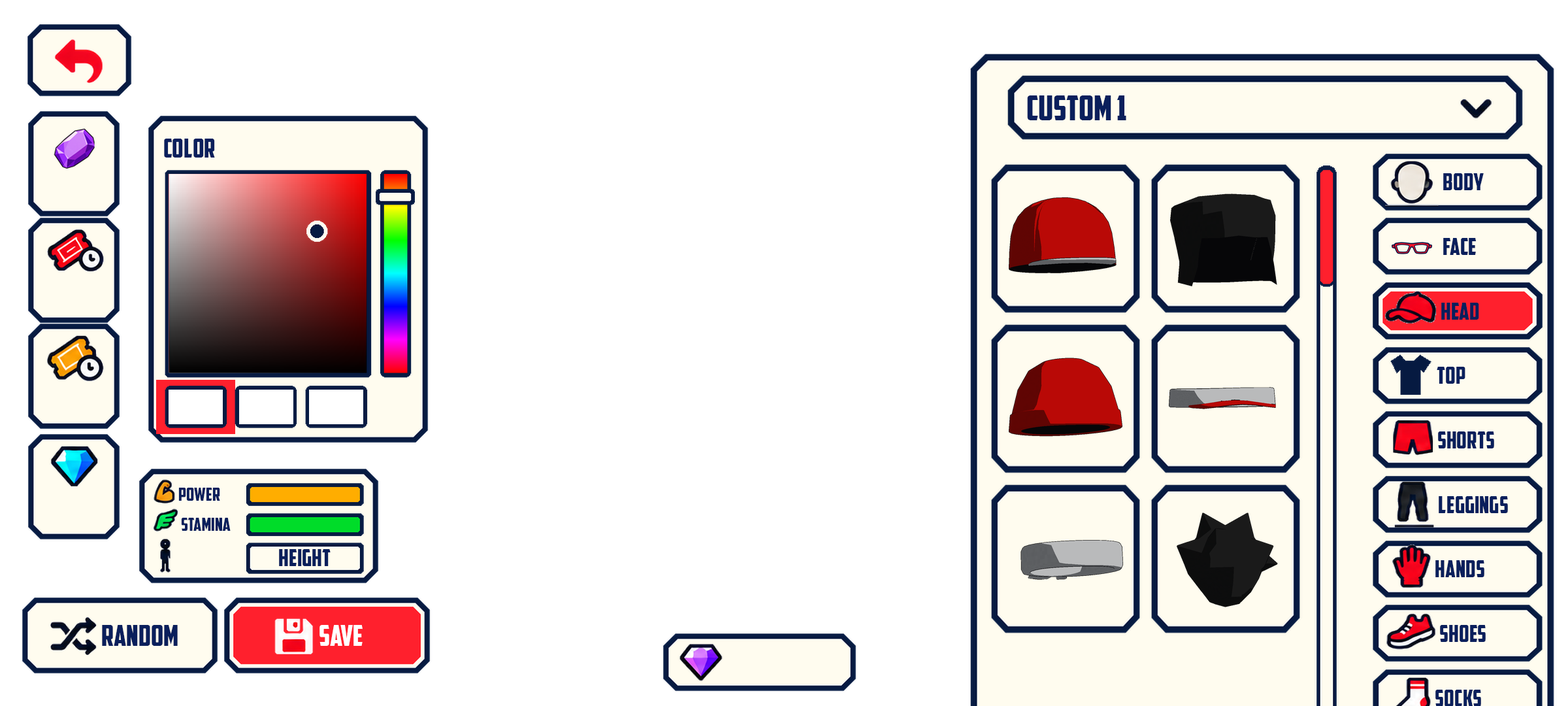
<style>
.page{position:relative;width:1568px;height:706px;background:#ffffff}
.page>*{position:absolute;margin:0}
.t1{font:34.5px "AmericanCaptain";color:#0a1f5c}
.t2{font:26.1px "AmericanCaptain";color:#0a1f5c}
.t3{font:23.5px "AmericanCaptain";color:#0a1f5c}
.t4{font:18.3px "AmericanCaptain";color:#0a1f5c}
.t5{font:28.7px "AmericanCaptain";color:#0a1f5c}
.t6{font:28.7px "AmericanCaptain";color:#ffffff}
</style>
<div class="page">
<p class="t1" style="left:1027px;top:95px;width:99px;height:25px">Custom 1</p>
<p class="t2" style="left:164px;top:139px;width:51px;height:18px">Color</p>
<p class="t3" style="left:1443px;top:173px;width:41px;height:17px">Body</p>
<p class="t3" style="left:1443px;top:238px;width:34px;height:17px">Face</p>
<p class="t3" style="left:1441px;top:302px;width:38px;height:17px">Head</p>
<p class="t3" style="left:1437px;top:367px;width:28px;height:17px">Top</p>
<p class="t3" style="left:1438px;top:431px;width:56px;height:17px">Shorts</p>
<p class="t4" style="left:178px;top:487px;width:42px;height:13px">Power</p>
<p class="t3" style="left:1439px;top:496px;width:69px;height:17px">Leggings</p>
<p class="t4" style="left:181px;top:517px;width:50px;height:14px">Stamina</p>
<p class="t3" style="left:279px;top:549px;width:52px;height:17px">Height</p>
<p class="t3" style="left:1435px;top:560px;width:49px;height:17px">Hands</p>
<p class="t5" style="left:102px;top:625px;width:76px;height:20px">Random</p>
<p class="t6" style="left:319px;top:625px;width:44px;height:20px">Save</p>
<p class="t3" style="left:1440px;top:625px;width:46px;height:17px">Shoes</p>
<p class="t3" style="left:1435px;top:689px;width:46px;height:17px">Socks</p>
</div>
